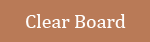
<style>
.page{position:relative;width:150px;height:42px;background:#b97a57}
.page>*{position:absolute;margin:0}
.t1{font:20px "CambriaMath";color:#fefdfc}
</style>
<div class="page">
<p class="t1" style="left:26px;top:14px;width:100px;height:14px">Clear Board</p>
</div>
